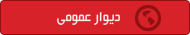
<style>
.page{position:relative;width:190px;height:35px;background:#d72229}
.page>*{position:absolute;margin:0}
.t1{font:15px "Mj_BeirutLtX3";color:#f1f2f2}
</style>
<div class="page">
<p class="t1" style="left:57px;top:12px;width:63px;height:13px">دیوار عمومی</p>
</div>
